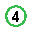
<style>
.page{position:relative;width:32px;height:32px;background:#ffffff}
.page>*{position:absolute;margin:0}
.t1{font:14px "Arial-BoldMT";color:#000000}
</style>
<div class="page">
<p class="t1" style="left:12px;top:11px;width:7px;height:11px">4</p>
</div>
